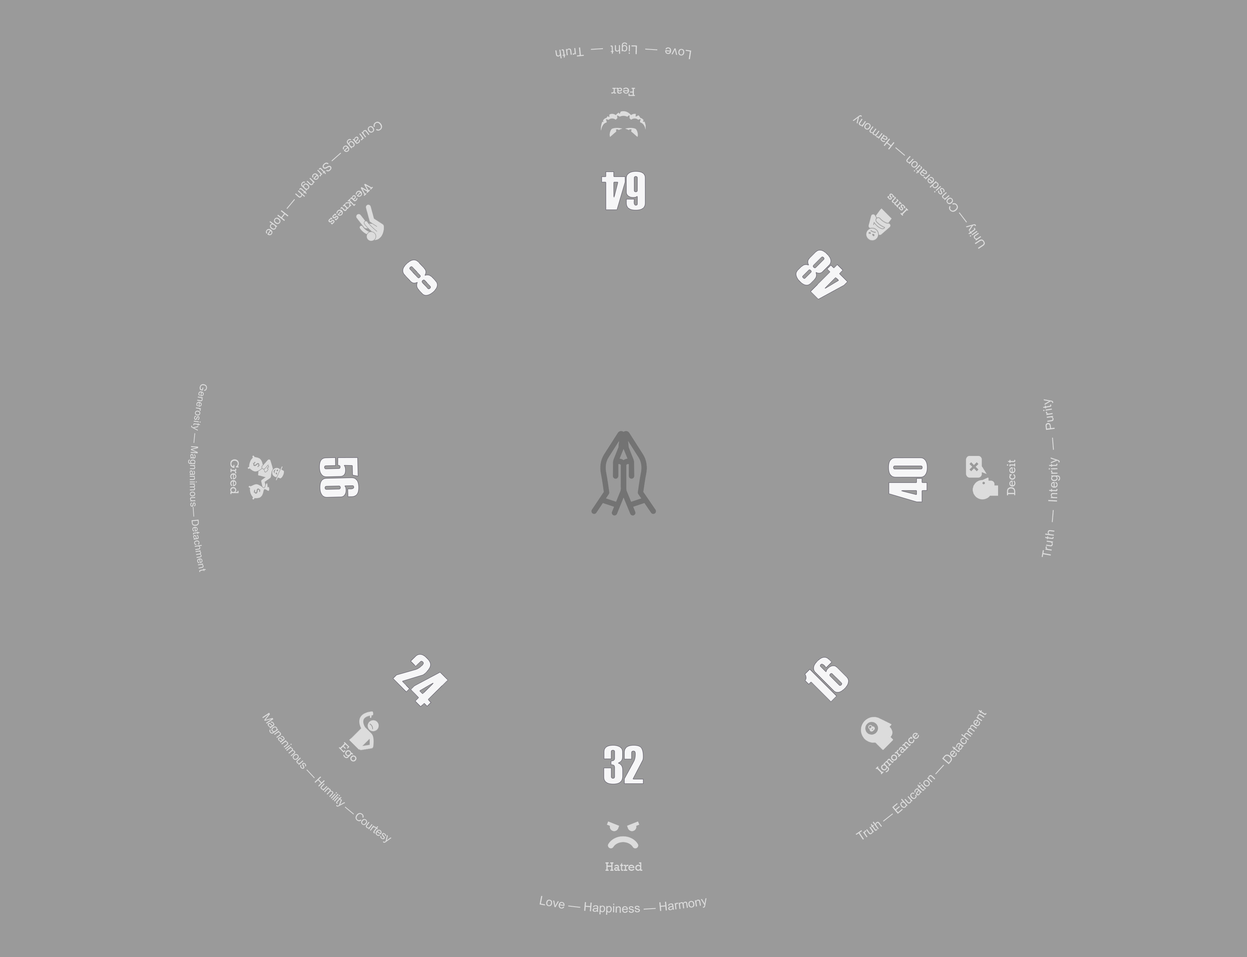
<style>
.page{position:relative;width:1247px;height:957px;background:#9a9a9a}
.page>*{position:absolute;margin:0}
.t1{font:12.1px "ArialMT";letter-spacing:0.025em;color:#dcdcdc}
.t2{font:12.1px "Rockwell";letter-spacing:-0.005em;color:#dcdcdc}
.t3{font:12.1px "ArialMT";letter-spacing:0.01em;color:#dcdcdc}
.t4{font:12.1px "ArialMT";letter-spacing:-0.01em;color:#dcdcdc}
.t5{font:9.7px "ArialMT";letter-spacing:0.01em;color:#dcdcdc}
.t6{font:11.2px "ArialMT";letter-spacing:-0.029em;color:#dcdcdc}
.t7{font:12.1px "Rockwell";letter-spacing:-0.015em;color:#dcdcdc}
.t8{font:12.1px "ArialMT";color:#dcdcdc}
</style>
<div class="page">
<p class="t1" style="left:555px;top:42px;width:136px;height:17px;rotate:-180deg">Love  —  Light  —  Truth</p>
<p class="t2" style="left:611px;top:87px;width:24px;height:9px;rotate:-180deg">Fear</p>
<p class="t3" style="left:266px;top:122px;width:116px;height:113px;rotate:135deg">Courage — Strength — Hope</p>
<p class="t4" style="left:852px;top:115px;width:132px;height:134px;rotate:-135deg">Unity — Consideration — Harmony</p>
<p class="t2" style="left:328px;top:184px;width:45px;height:41px;rotate:135deg">Weakness</p>
<p class="t2" style="left:887px;top:193px;width:21px;height:23px;rotate:-135deg">Isms</p>
<p class="t5" style="left:188px;top:384px;width:19px;height:188px;rotate:90deg">Generosity — Magnanimous— Detachment</p>
<p class="t1" style="left:1041px;top:399px;width:19px;height:158px;rotate:-60deg">Truth  —  Integrity  —  Purity</p>
<p class="t2" style="left:230px;top:459px;width:9px;height:35px;rotate:90deg">Greed</p>
<p class="t2" style="left:1006px;top:459px;width:9px;height:36px;rotate:-90deg">Deceit</p>
<p class="t6" style="left:262px;top:712px;width:129px;height:131px;rotate:45deg">Magnanimous — Humility — Courtesy</p>
<p class="t4" style="left:855px;top:709px;width:131px;height:130px;rotate:-46deg">Truth — Education — Detachment</p>
<p class="t7" style="left:875px;top:732px;width:44px;height:42px;rotate:-45deg">Ignorance</p>
<p class="t2" style="left:339px;top:742px;width:17px;height:19px;rotate:45deg">Ego</p>
<p class="t2" style="left:605px;top:862px;width:37px;height:8px">Hatred</p>
<p class="t8" style="left:539px;top:895px;width:167px;height:19px">Love — Happiness — Harmony</p>
</div>
